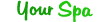
<style>
.page{position:relative;width:108px;height:22px;background:#ffffff}
.page>*{position:absolute;margin:0}
.t1{font:20px "Tabitha";color:#149c0a}
.t2{font:21px "Tabitha";color:#1ec70c}
</style>
<div class="page">
<p class="t1" style="left:17px;top:0px;width:37px;height:21px">Your</p>
<p class="t2" style="left:58px;top:0px;width:35px;height:22px">Spa</p>
</div>
